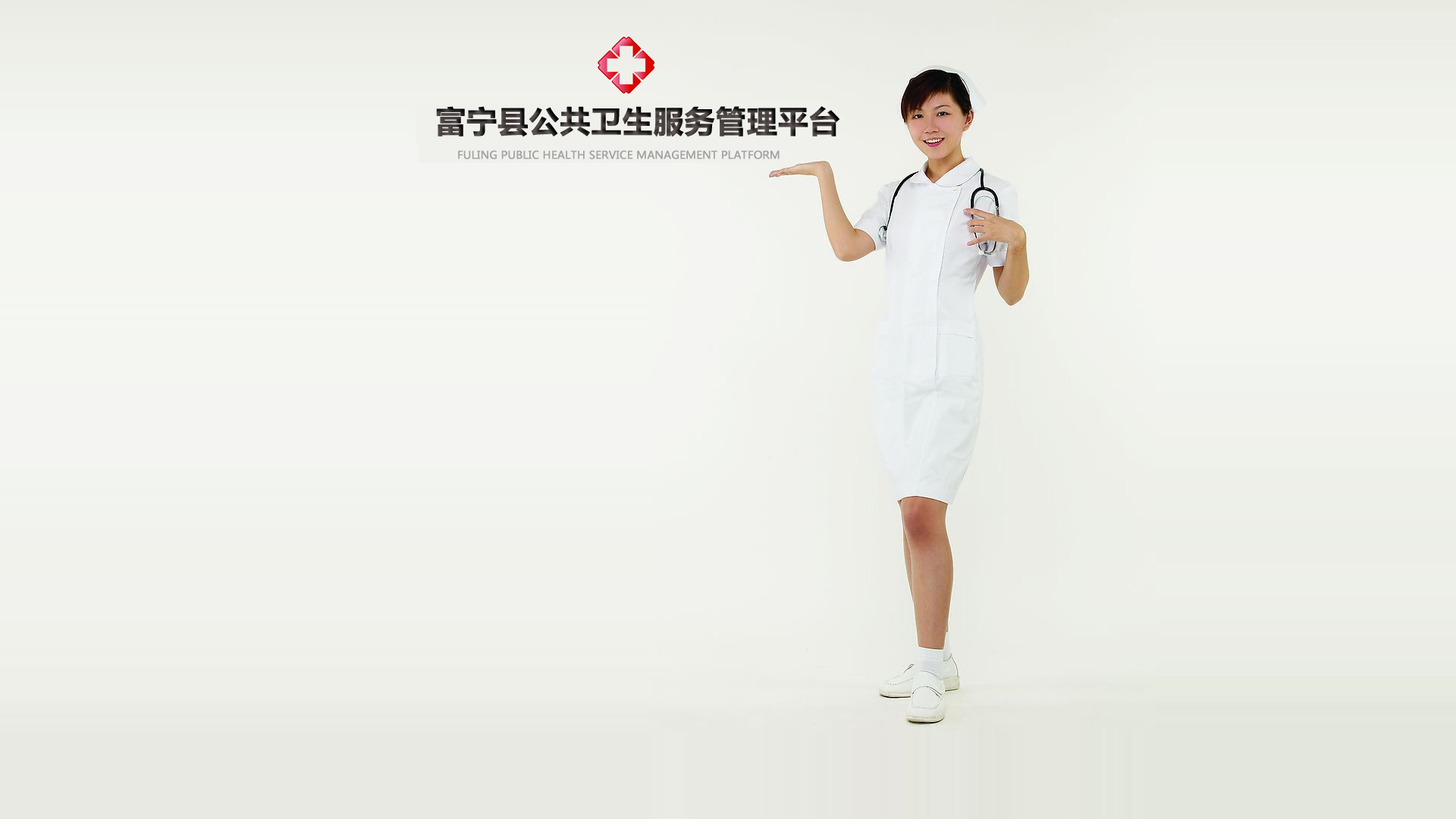
<style>
.page{position:relative;width:1456px;height:819px}
.page>*{position:absolute;margin:0}
.t1{font:30.3px "MicrosoftYaHei-Bold";font-weight:bold}
.t2{font:10.6px "MicrosoftYaHei";color:#a3a3a3;font-weight:bold}
</style>
<div class="page">
<p class="t1" style="left:436px;top:106px;width:403px;height:31px">富宁县公共卫生服务管理平台</p>
<p class="t2" style="left:458px;top:150px;width:322px;height:9px">FULING PUBLIC HEALTH SERVICE MANAGEMENT PLATFORM</p>
</div>
